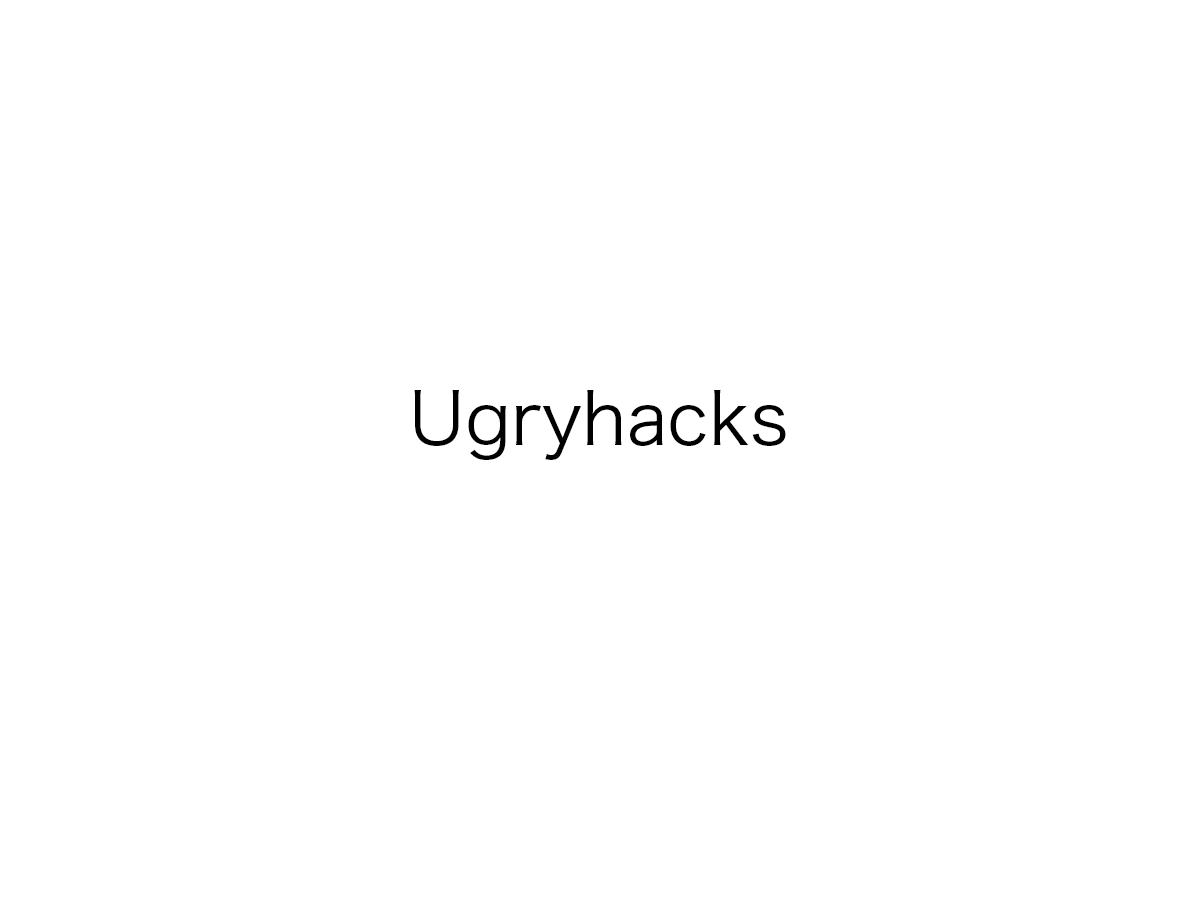
<style>
.page{position:relative;width:1200px;height:900px;background:#ffffff}
.page>*{position:absolute;margin:0}
.t1{font:72px "HiraKakuPro-W3";color:#010101}
</style>
<div class="page">
<p class="t1" style="left:414px;top:390px;width:372px;height:70px">Ugryhacks</p>
</div>
